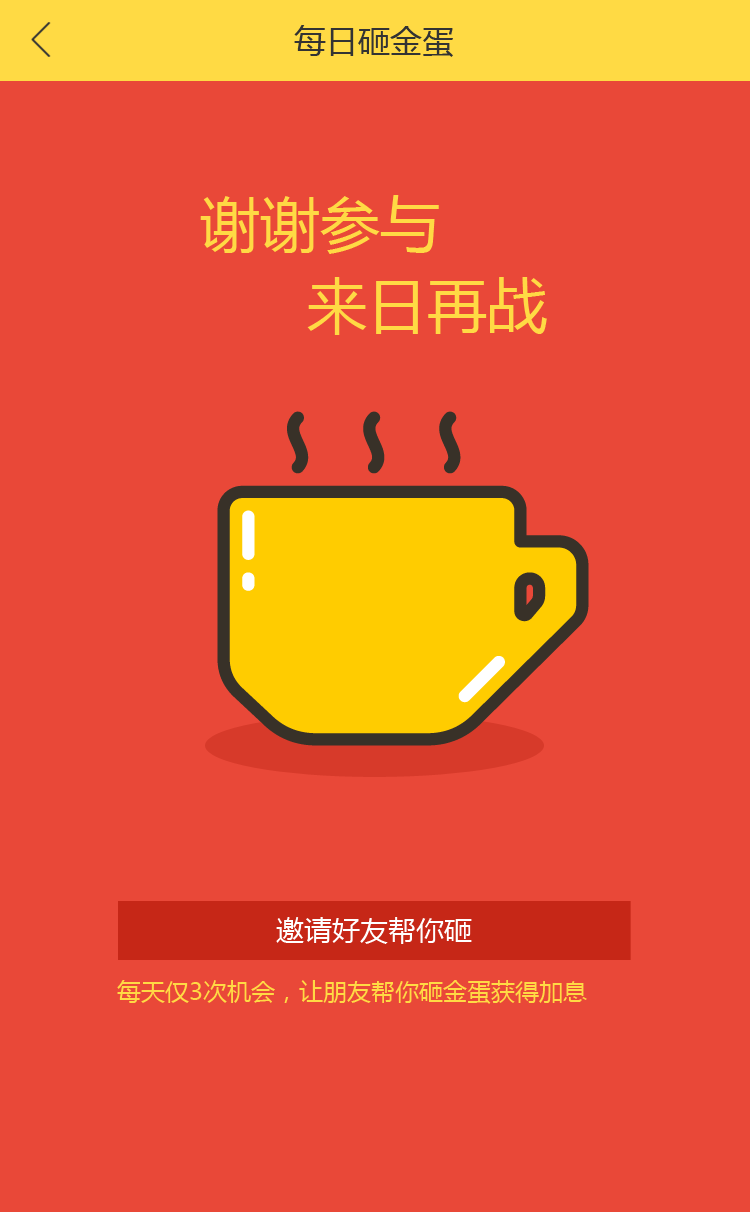
<style>
.page{position:relative;width:750px;height:1212px;background:#e94838}
.page>*{position:absolute;margin:0}
.t1{font:32px "MicrosoftYaHei";color:#333333}
.t2{font:60px/81.4px "MicrosoftYaHei";color:#ffda44}
.t3{font:28px "MicrosoftYaHei";color:#ffffff}
.t4{font:24px "MicrosoftYaHei";color:#ffda44}
</style>
<div class="page">
<p class="t1" style="left:294px;top:25px;width:159px;height:32px">每日砸金蛋</p>
<p class="t2" style="left:200px;top:195px;width:347px;height:140px">谢谢参与 <br>      来日再战</p>
<p class="t3" style="left:276px;top:917px;width:196px;height:27px">邀请好友帮你砸</p>
<p class="t4" style="left:117px;top:980px;width:470px;height:24px">每天仅3次机会，让朋友帮你砸金蛋获得加息</p>
</div>
